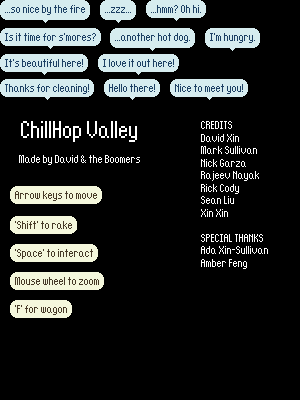
<style>
.page{position:relative;width:300px;height:400px;background:#000000}
.page>*{position:absolute;margin:0}
.t1{font:10.4px "chillhop-valley";color:#ffffff}
.t2{font:20.8px "chillhop-valley";color:#ffffff}
.t3{font:10.4px "chillhop-valley";color:#463927}
</style>
<div class="page">
<p class="t1" style="left:19px;top:121px;width:121px;height:44px;text-align:center"><span class="t2">ChillHop Valley<br></span><br>Made by David &amp; the Boomers</p>
<p class="t1" style="left:201px;top:121px;width:67px;height:148px">CREDITS<br>David Xin <br>Mark Sullivan<br>Nick Garza<br>Rajeev Nayak<br>Rick Cody<br>Sean Liu<br>Xin Xin<br><br>SPECIAL THANKS<br>Ada Xin-Sullivan<br>Amber Feng</p>
<p class="t3" style="left:15px;top:191px;width:82px;height:10px">Arrow keys to move</p>
<p class="t3" style="left:15px;top:221px;width:57px;height:8px">‘Shift’ to rake</p>
<p class="t3" style="left:15px;top:249px;width:78px;height:10px">‘Space’ to interact</p>
<p class="t3" style="left:15px;top:277px;width:84px;height:8px">Mouse wheel to zoom</p>
<p class="t3" style="left:15px;top:305px;width:52px;height:10px">‘F’ for wagon</p>
</div>
